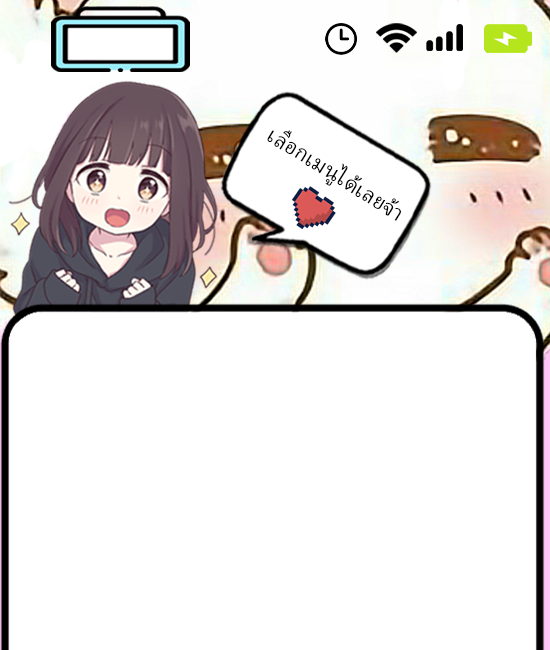
<style>
.page{position:relative;width:550px;height:650px;background:#ffffff}
.page>*{position:absolute;margin:0}
.t1{font:28px "AdobeThai-Regular";color:#000000}
</style>
<div class="page">
<p class="t1" style="left:267px;top:130px;width:134px;height:91px;rotate:32deg">เลือกเมนูได้เลยจ้า</p>
</div>
